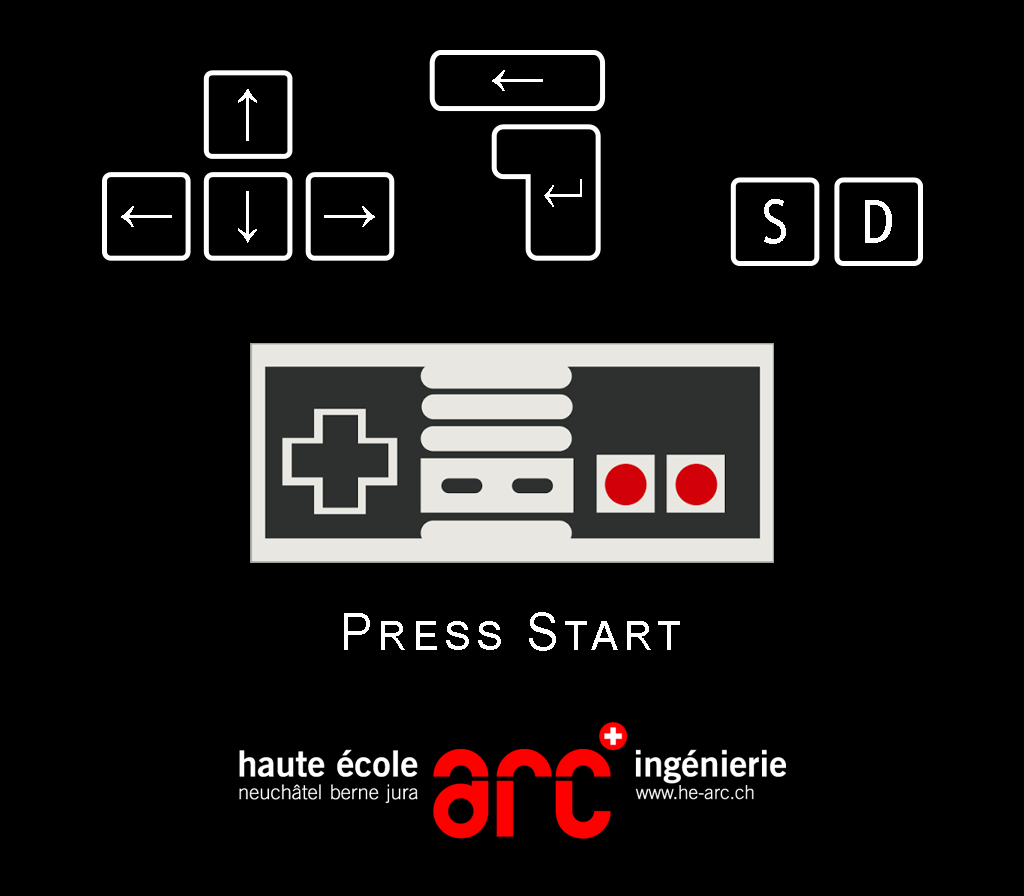
<style>
.page{position:relative;width:1024px;height:896px;background:#000000}
.page>*{position:absolute;margin:0}
.t1{font:59.8px "ArialMT";letter-spacing:0.12em;color:#fffefe;font-variant:small-caps;scale:0.91 1}
.t2{font:59.8px "ArialMT";letter-spacing:0.12em;color:#ffffff;font-variant:small-caps;scale:0.91 1}
.t3{font:59.7px "OpenSymbol";letter-spacing:0.12em;color:#ffffff;font-variant:small-caps;scale:0.92 1}
.t4{font:59.8px "TrebuchetMS";letter-spacing:0.12em;color:#ffffff;font-variant:small-caps;scale:0.91 1}
.t5{font:59.8px "TrebuchetMS";letter-spacing:0.12em;color:#fefefe;font-variant:small-caps;scale:0.91 1}
.t6{font:52px "ArialMT";letter-spacing:0.12em;color:#ffffff;font-variant:small-caps;scale:0.91 1}
</style>
<div class="page">
<p class="t1" style="left:492px;top:70px;width:51px;height:21px">←</p>
<p class="t2" style="left:238px;top:89px;width:19px;height:52px">↑</p>
<p class="t3" style="left:544px;top:179px;width:38px;height:28px">↲</p>
<p class="t2" style="left:238px;top:191px;width:19px;height:52px">↓</p>
<p class="t2" style="left:121px;top:206px;width:51px;height:21px">←</p>
<p class="t2" style="left:324px;top:206px;width:51px;height:21px">→</p>
<p class="t4" style="left:764px;top:199px;width:22px;height:45px">S</p>
<p class="t5" style="left:865px;top:200px;width:27px;height:43px">D</p>
<p class="t6" style="left:344px;top:612px;width:336px;height:39px">Press Start</p>
</div>
